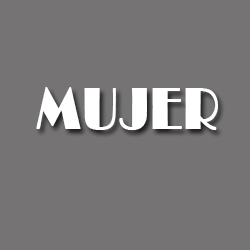
<style>
.page{position:relative;width:250px;height:250px;background:#757373}
.page>*{position:absolute;margin:0}
.t1{font:60px "Broadway";letter-spacing:0.025em;color:#ffffff;font-weight:bold;scale:0.76 1}
</style>
<div class="page">
<p class="t1" style="left:36px;top:87px;width:182px;height:43px">MUJER</p>
</div>
